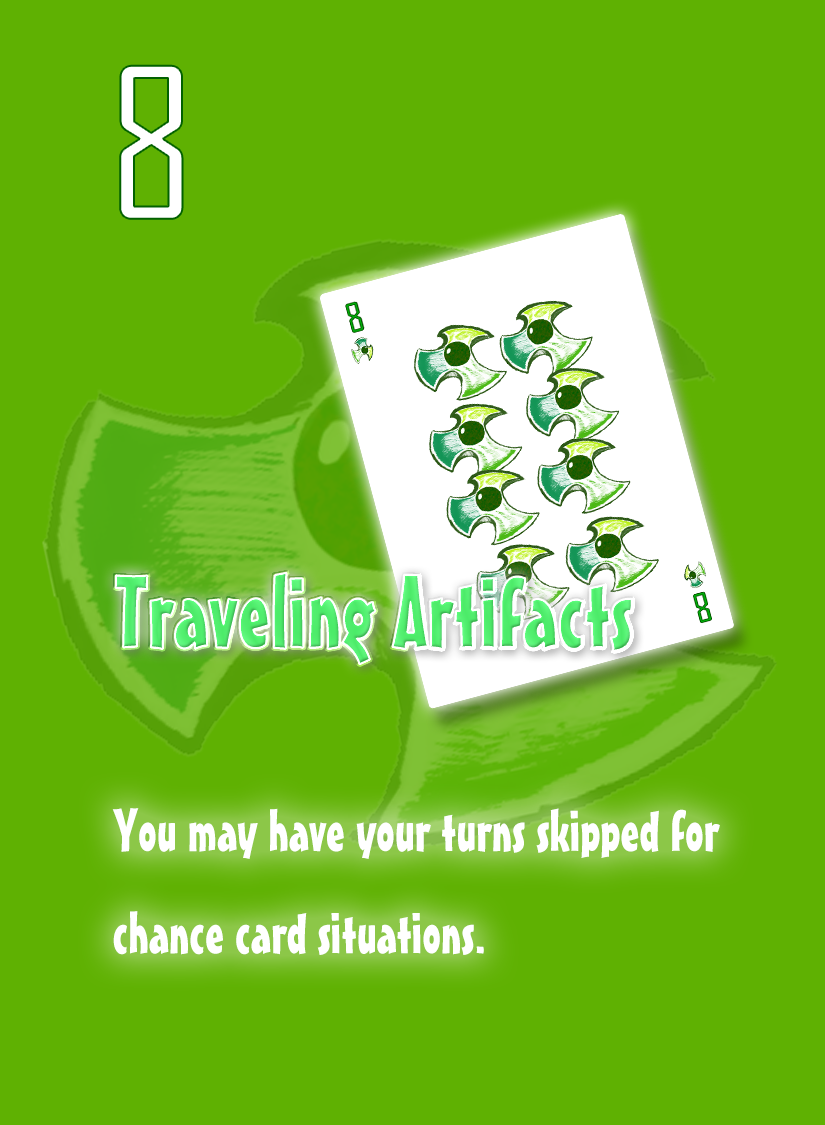
<style>
.page{position:relative;width:825px;height:1125px;background:#5fb102}
.page>*{position:absolute;margin:0}
.t1{font:200px "AgencyFB-Reg";color:#ffffff}
.t2{font:100px "MisterEarlBT-Regular";color:#52ed6f}
.t3{font:58.3px "MisterEarlBT-Regular";color:#ffffff}
</style>
<div class="page">
<p class="t1" style="left:120px;top:65px;width:63px;height:154px">8</p>
<p class="t2" style="left:115px;top:572px;width:517px;height:92px">Traveling Artifacts</p>
<p class="t3" style="left:112px;top:808px;width:608px;height:147px">You may have your turns skipped for <br>chance card situations.</p>
</div>
